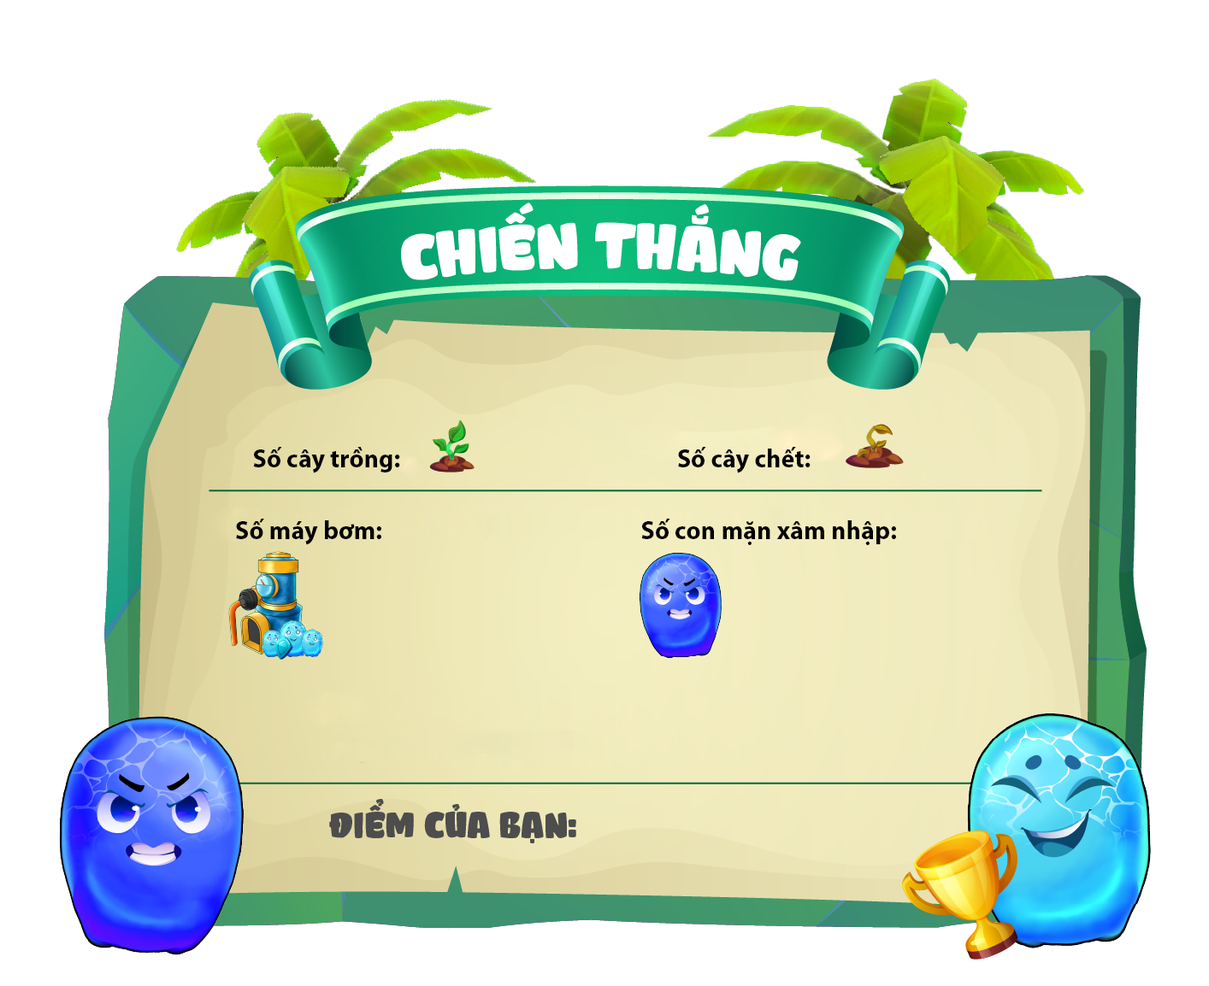
<style>
.page{position:relative;width:1209px;height:986px;background:#ffffff}
.page>*{position:absolute;margin:0}
.t1{font:25.6px "MyriadPro-Bold";color:#000000}
</style>
<div class="page">
<p class="t1" style="left:253px;top:447px;width:147px;height:27px">Số cây trồng:</p>
<p class="t1" style="left:678px;top:447px;width:132px;height:27px">Số cây chết:</p>
<p class="t1" style="left:236px;top:519px;width:145px;height:26px">Số máy bơm:</p>
<p class="t1" style="left:641px;top:519px;width:255px;height:26px">Số con mặn xâm nhập:</p>
</div>
